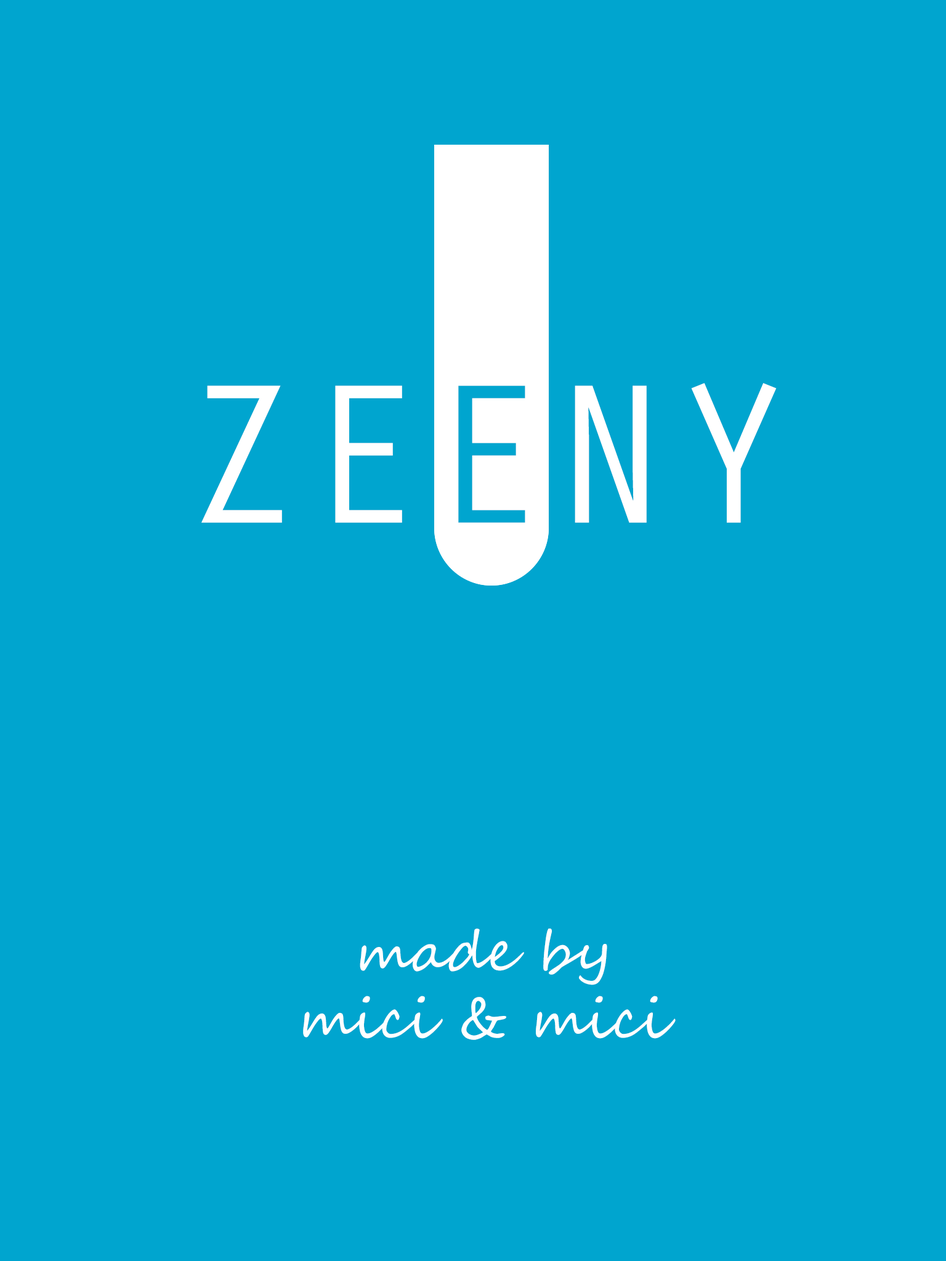
<style>
.page{position:relative;width:946px;height:1261px;background:#00a5cf}
.page>*{position:absolute;margin:0}
.t1{font:205px "OratorStd";color:#ffffff}
.t2{font:205px "OratorStd";color:#00a5cf}
.t3{font:55.4px "SegoeScript";color:#ffffff}
</style>
<div class="page">
<p class="t1" style="left:201px;top:383px;width:575px;height:140px">ZE<span class="t2">E</span>NY</p>
<p class="t3" style="left:303px;top:928px;width:372px;height:112px;text-align:center">made by<br>mici &amp; mici</p>
</div>
